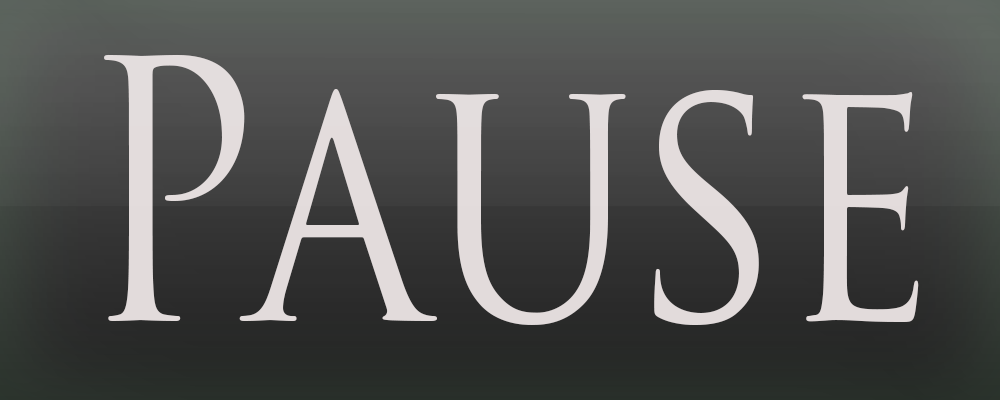
<style>
.page{position:relative;width:1000px;height:400px}
.page>*{position:absolute;margin:0}
.t1{font:352.2px "TrajanPro-Regular";color:#e2dbdb;scale:0.81 1}
</style>
<div class="page">
<p class="t1" style="left:104px;top:54px;width:815px;height:271px">Pause</p>
</div>
